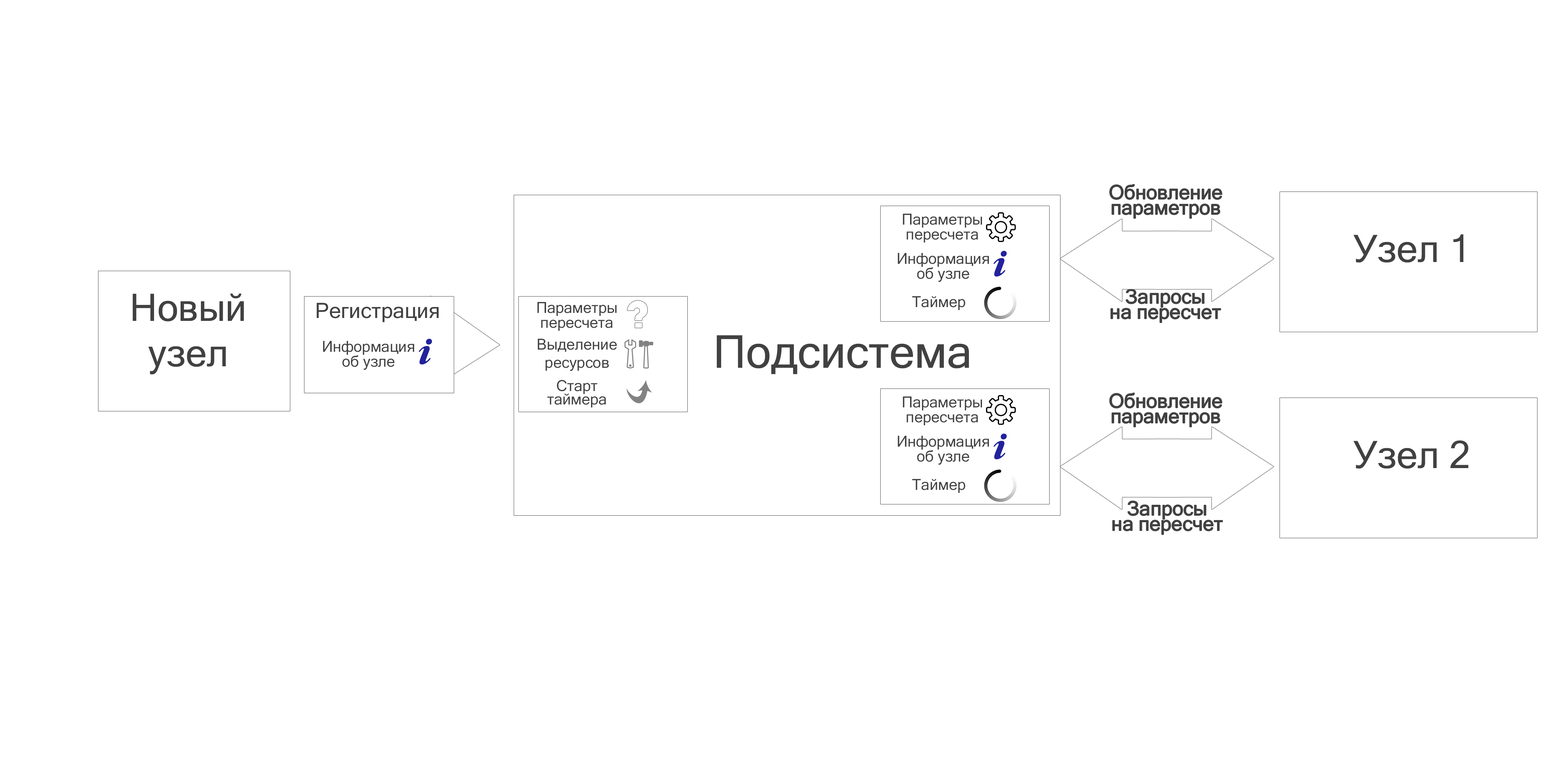
<style>
.page{position:relative;width:1568px;height:757px;background:#ffffff}
.page>*{position:absolute;margin:0}
.t1{font:19.7px/15.1px "MicrosoftSansSerif";color:#414141}
.t2{font:15.1px/15.1px "MicrosoftSansSerif";color:#414141}
.t3{font:37.8px "MicrosoftSansSerif";color:#414141}
.t4{font:21.2px "MicrosoftSansSerif";color:#414141}
.t5{font:15.1px "MicrosoftSansSerif";color:#414141}
.t6{font:45.4px "MicrosoftSansSerif";color:#414141}
.t7{font:15.1px/13.6px "MicrosoftSansSerif";color:#414141}
</style>
<div class="page">
<p class="t1" style="left:1110px;top:184px;width:112px;height:34px;text-align:center">Обновление<br>параметров</p>
<p class="t2" style="left:903px;top:214px;width:79px;height:29px;text-align:center">Параметры<br>пересчета</p>
<p class="t3" style="left:1353px;top:234px;width:110px;height:29px">Узел 1</p>
<p class="t2" style="left:898px;top:253px;width:91px;height:29px;text-align:center">Информация<br>об узле</p>
<p class="t3" style="left:133px;top:293px;width:111px;height:81px;text-align:center">Новый<br>узел</p>
<p class="t1" style="left:1111px;top:289px;width:110px;height:34px;text-align:center">Запросы<br>на пересчет</p>
<p class="t4" style="left:316px;top:303px;width:123px;height:19px">Регистрация</p>
<p class="t2" style="left:537px;top:302px;width:80px;height:29px;text-align:center">Параметры<br>пересчета</p>
<p class="t5" style="left:912px;top:296px;width:53px;height:14px">Таймер</p>
<p class="t2" style="left:323px;top:341px;width:91px;height:29px;text-align:center">Информация<br>об узле</p>
<p class="t5" style="left:538px;top:339px;width:79px;height:32px;text-align:center">Выделение<br>ресурсов</p>
<p class="t6" style="left:717px;top:335px;width:252px;height:39px">Подсистема</p>
<p class="t7" style="left:547px;top:380px;width:59px;height:28px;text-align:center">Старт<br>таймера</p>
<p class="t2" style="left:903px;top:396px;width:79px;height:29px;text-align:center">Параметры<br>пересчета</p>
<p class="t1" style="left:1110px;top:393px;width:112px;height:34px;text-align:center">Обновление<br>параметров</p>
<p class="t2" style="left:898px;top:436px;width:91px;height:29px;text-align:center">Информация<br>об узле</p>
<p class="t3" style="left:1353px;top:440px;width:115px;height:29px">Узел 2</p>
<p class="t5" style="left:912px;top:479px;width:53px;height:14px">Таймер</p>
<p class="t1" style="left:1112px;top:501px;width:111px;height:33px;text-align:center">Запросы<br>на пересчет</p>
</div>
